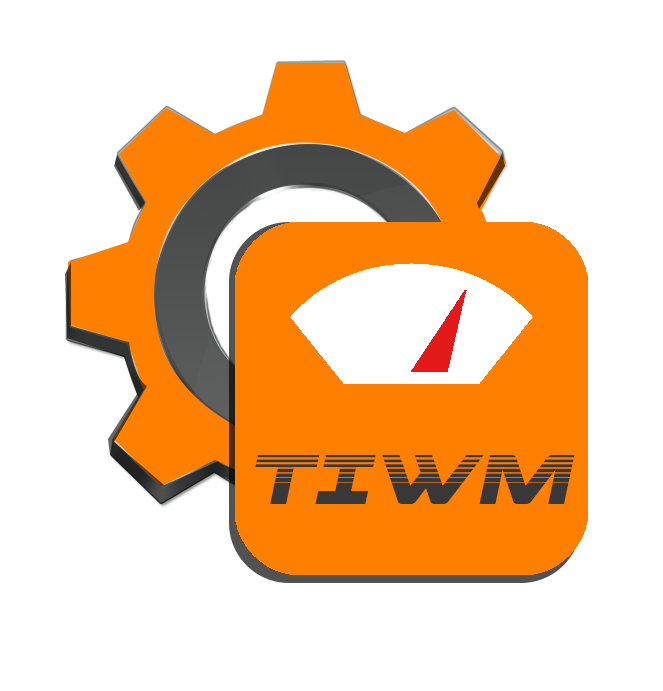
<style>
.page{position:relative;width:663px;height:691px;background:#ffffff}
.page>*{position:absolute;margin:0}
.t1{font:80px "BeamWeaponHalftoneItalic";color:#393737}
.t2{font:30.7px "PraetorianBold";color:#393737}
</style>
<div class="page">
<p class="t1" style="left:255px;top:455px;width:320px;height:49px"><span class="t2">  </span> TIWM</p>
</div>
